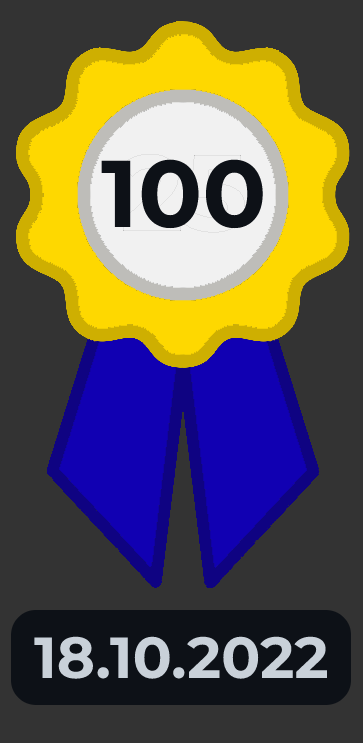
<style>
.page{position:relative;width:363px;height:743px;background:#333333}
.page>*{position:absolute;margin:0}
.t1{font:94.6px "Montserrat-Bold";color:#0d1117}
.t2{font:58px "Montserrat-Bold";color:#c9d1d9}
</style>
<div class="page">
<p class="t1" style="left:101px;top:159px;width:162px;height:70px">100</p>
<p class="t2" style="left:34px;top:636px;width:293px;height:43px">18.10.2022</p>
</div>
